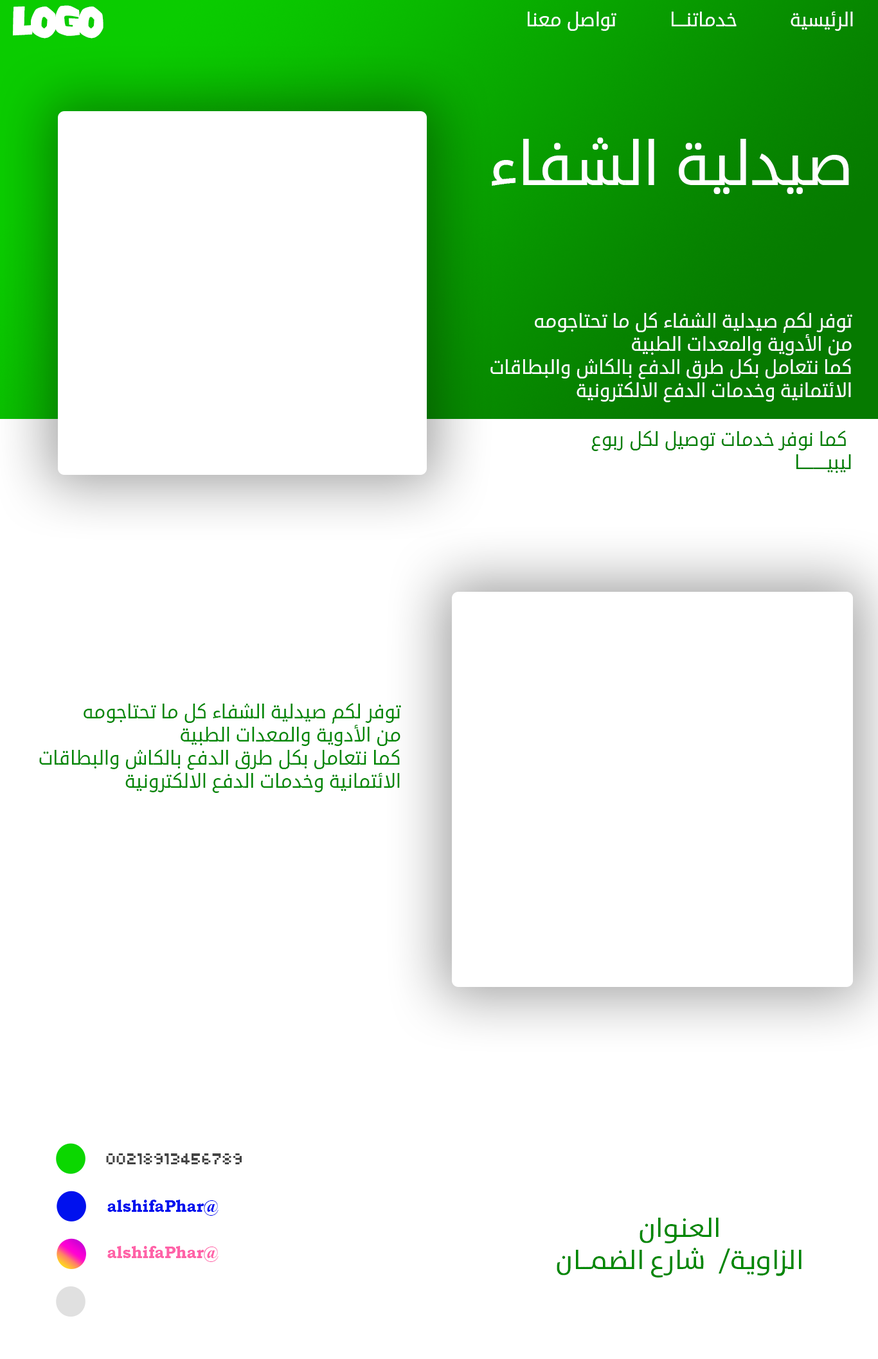
<style>
.page{position:relative;width:878px;height:1359px;background:#ffffff}
.page>*{position:absolute;margin:0}
.t1{font:27.8px "One-Flew-Over-The-Cuckoo's-Nest-Regular";color:#ffffff}
.t2{font:19.3px "AGOOGLE";color:#ffffff}
.t3{font:61.3px "AGOOGLE";color:#ffffff}
.t4{font:19.2px "AGOOGLE";color:#ffffff}
.t5{font:19.2px "AGOOGLE";color:#007f03}
.t6{font:19.2px "AGOOGLE";color:#008703}
.t7{font:17.2px "04b03";color:#444444;scale:0.97 1}
.t8{font:17.2px "BookmanOldStyle-Bold";color:#0011ee;scale:0.97 1}
.t9{font:27.2px "TheSans-Plain";color:#008703}
.t10{font:17.2px "BookmanOldStyle-Bold";color:#ff62a8;scale:0.97 1}
</style>
<div class="page">
<p class="t1" style="left:13px;top:5px;width:90px;height:34px">Logo</p>
<p class="t2" style="left:527px;top:12px;width:89px;height:19px">تواصل معنا</p>
<p class="t2" style="left:671px;top:12px;width:65px;height:14px">خدماتنـــا</p>
<p class="t2" style="left:790px;top:12px;width:63px;height:19px">الرئيسية</p>
<p class="t3" style="left:491px;top:137px;width:358px;height:57px">صيدلية الشفاء</p>
<p class="t4" style="left:490px;top:312px;width:362px;height:90px">توفر لكم صيدلية الشفاء كل ما تحتاجومه<br>من الأدوية والمعدات الطبية<br>كما نتعامل بكل طرق الدفع بالكاش والبطاقات<br>الائتمانية وخدمات الدفع الالكترونية</p>
<p class="t5" style="left:591px;top:430px;width:260px;height:43px">كما نوفر خدمات توصيل لكل ربوع <br>ليبيــــــــا</p>
<p class="t6" style="left:39px;top:703px;width:362px;height:90px">توفر لكم صيدلية الشفاء كل ما تحتاجومه<br>من الأدوية والمعدات الطبية<br>كما نتعامل بكل طرق الدفع بالكاش والبطاقات<br>الائتمانية وخدمات الدفع الالكترونية</p>
<p class="t7" style="left:106px;top:1153px;width:136px;height:11px">00218913456789</p>
<p class="t8" style="left:107px;top:1199px;width:111px;height:17px">@alshifaPhar</p>
<p class="t9" style="left:556px;top:1217px;width:245px;height:61px;text-align:center">العنوان<br>الزاوية/  شارع الضمـــان</p>
<p class="t10" style="left:107px;top:1246px;width:111px;height:16px">@alshifaPhar</p>
</div>
